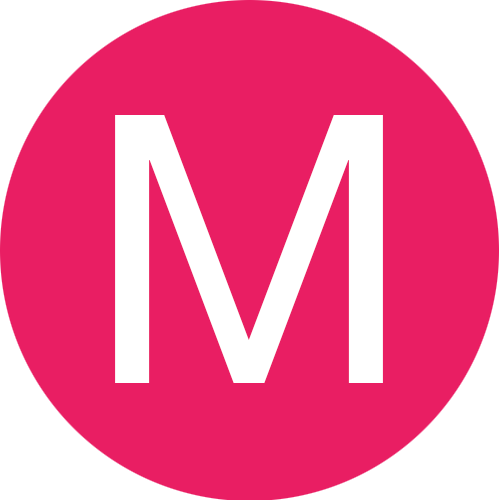
<style>
.page{position:relative;width:500px;height:500px;background:#e91e63}
.page>*{position:absolute;margin:0}
.t1{font:375.2px "HelveticaNeue";color:#ffffff}
</style>
<div class="page">
<p class="t1" style="left:115px;top:115px;width:268px;height:268px">M</p>
</div>
